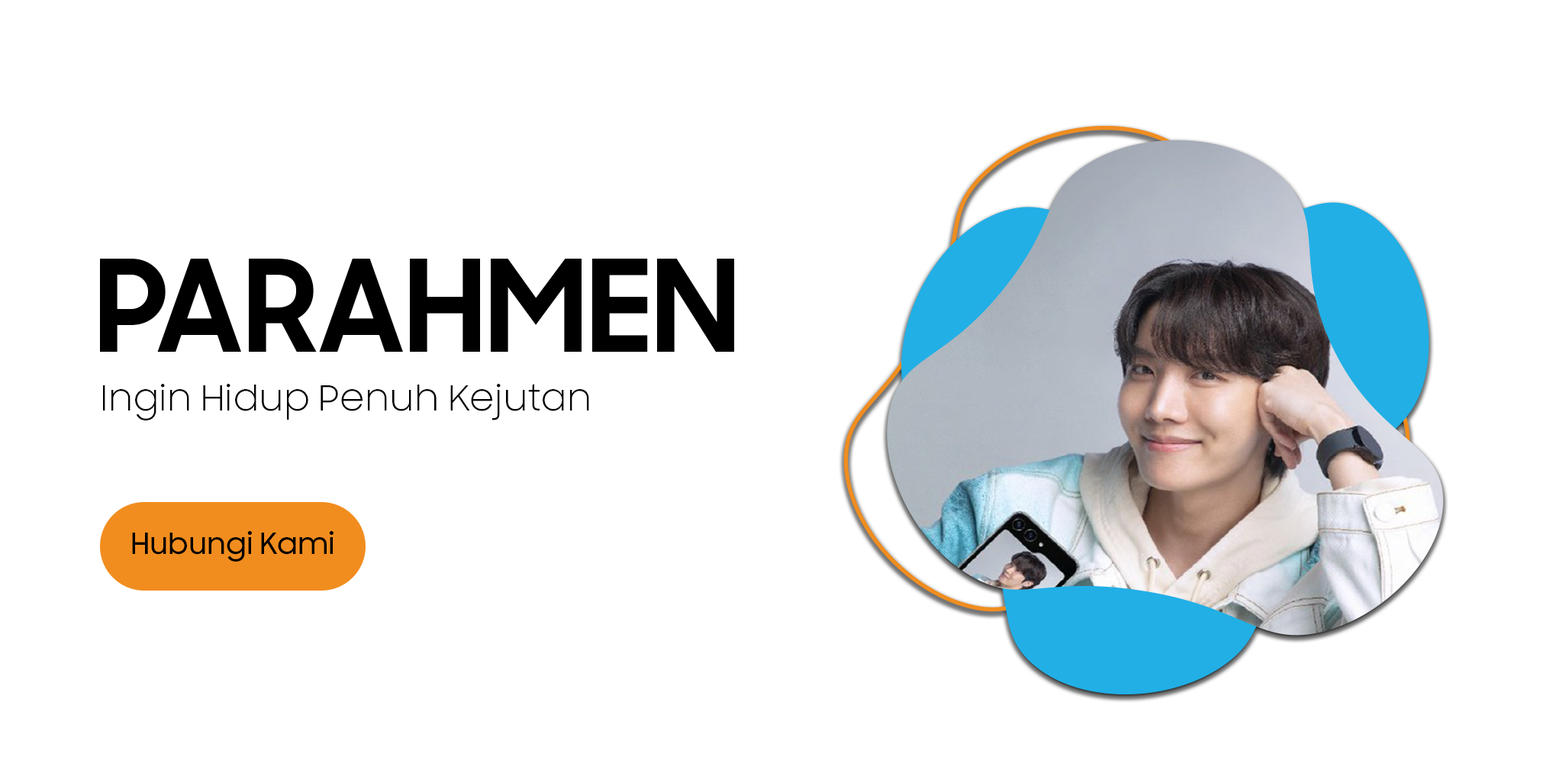
<style>
.page{position:relative;width:1563px;height:763px;background:#ffffff}
.page>*{position:absolute;margin:0}
.t1{font:127.2px "SamsungSharpSans-Bold";color:#000000}
.t2{font:35px "SamsungSharpSans";color:#000000}
.t3{font:28.6px "SamsungSharpSans-Medium";color:#000000}
</style>
<div class="page">
<p class="t1" style="left:100px;top:258px;width:634px;height:95px">PARAHMEN</p>
<p class="t2" style="left:103px;top:384px;width:486px;height:36px">Ingin Hidup Penuh Kejutan</p>
<p class="t3" style="left:132px;top:531px;width:201px;height:31px">Hubungi Kami</p>
</div>
